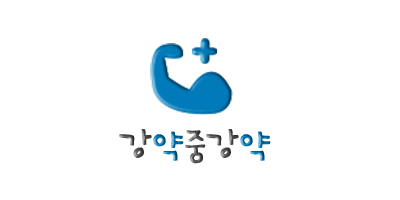
<style>
.page{position:relative;width:400px;height:200px;background:#ffffff}
.page>*{position:absolute;margin:0}
.t1{font:39.3px "UhBeepuding";letter-spacing:-0.025em;font-weight:bold}
</style>
<div class="page">
<p class="t1" style="left:119px;top:129px;width:152px;height:35px">강약중강약</p>
</div>
